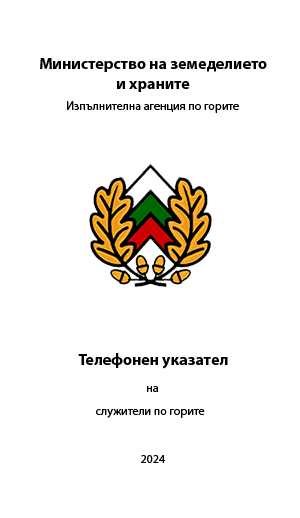
<style>
.page{position:relative;width:300px;height:518px;background:#ffffff}
.page>*{position:absolute;margin:0}
.t1{font:16px "MyriadPro-Bold";color:#000000}
.t2{font:12px "MyriadPro-Regular";color:#000000}
</style>
<div class="page">
<p class="t1" style="left:40px;top:58px;width:227px;height:34px;text-align:center">Министерство на земеделието<br>и храните</p>
<p class="t2" style="left:67px;top:101px;width:172px;height:12px">Изпълнителна агенция по горите</p>
<p class="t1" style="left:78px;top:353px;width:150px;height:16px">Телефонен указател</p>
<p class="t2" style="left:147px;top:386px;width:12px;height:6px">на</p>
<p class="t2" style="left:96px;top:409px;width:109px;height:9px">служители по горите</p>
<p class="t2" style="left:141px;top:455px;width:25px;height:8px">2024</p>
</div>
